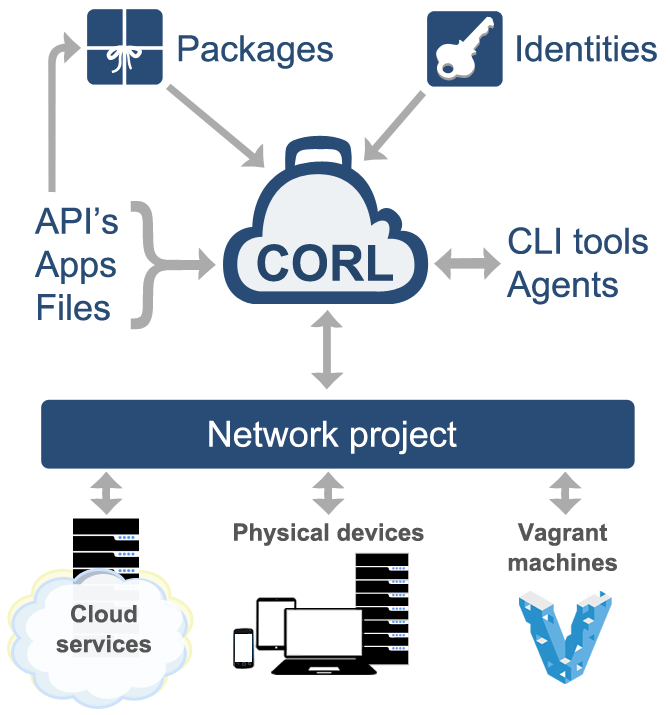
<style>
.page{position:relative;width:670px;height:715px;background:#ffffff}
.page>*{position:absolute;margin:0}
.t1{font:36px "ArialMT";color:#294c76}
.t2{font:136.4px "ArialMT";color:#ababab;scale:0.89 1}
.t3{font:50.1px "Arial-BoldMT";color:#25456b}
.t4{font:36px "ArialMT";color:#ffffff}
.t5{font:24px "Arial-BoldMT";color:#565656}
.t6{font:24px/30px "Arial-BoldMT";color:#565656}
.t7{font:24px/30px "Arial-BoldMT";color:#555555}
</style>
<div class="page">
<p class="t1" style="left:178px;top:35px;width:155px;height:34px">Packages</p>
<p class="t1" style="left:517px;top:35px;width:140px;height:27px">Identities</p>
<p class="t1" style="left:35px;top:207px;width:83px;height:114px">API’s<br>Apps<br>Files</p>
<p class="t2" style="left:130px;top:201px;width:36px;height:129px">}</p>
<p class="t1" style="left:507px;top:227px;width:141px;height:78px">CLI tools <br>Agents</p>
<p class="t3" style="left:257px;top:244px;width:136px;height:38px">CORL</p>
<p class="t4" style="left:209px;top:420px;width:248px;height:35px">Network project</p>
<p class="t5" style="left:234px;top:523px;width:190px;height:23px">Physical devices</p>
<p class="t6" style="left:508px;top:523px;width:109px;height:48px;text-align:center">Vagrant <br>machines</p>
<p class="t7" style="left:56px;top:604px;width:95px;height:49px;text-align:center">Cloud <br>services</p>
</div>
